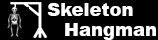
<style>
.page{position:relative;width:158px;height:40px;background:#000000}
.page>*{position:absolute;margin:0}
.t1{font:18px "Arial-Black";color:#fefefe}
</style>
<div class="page">
<p class="t1" style="left:47px;top:3px;width:86px;height:13px">Skeleton</p>
<p class="t1" style="left:65px;top:23px;width:91px;height:17px">Hangman</p>
</div>
